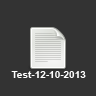
<style>
.page{position:relative;width:96px;height:96px;background:#333333}
.page>*{position:absolute;margin:0}
.t1{font:10px "Arial-BoldMT";color:#ffffff}
</style>
<div class="page">
<p class="t1" style="left:11px;top:71px;width:75px;height:7px">Test-12-10-2013</p>
</div>
